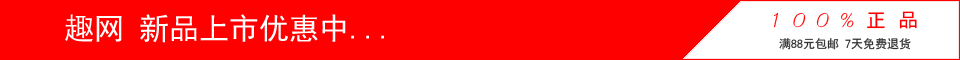
<style>
.page{position:relative;width:960px;height:60px;background:#ff0000}
.page>*{position:absolute;margin:0}
.t1{font:30px "SimHei";color:#ffffff}
.t2{font:20px "-";letter-spacing:0.62em;color:#ff0000}
.t3{font:20px "SimHei";letter-spacing:0.62em;color:#ff0000}
.t4{font:12px "SimHei";color:#2f2f2f}
</style>
<div class="page">
<p class="t1" style="left:65px;top:14px;width:319px;height:29px">趣网 新品上市优惠中...</p>
<p class="t2" style="left:773px;top:11px;width:144px;height:18px">100%<span class="t3">正品</span></p>
<p class="t4" style="left:779px;top:38px;width:132px;height:12px">满88元包邮 7天免费退货</p>
</div>
